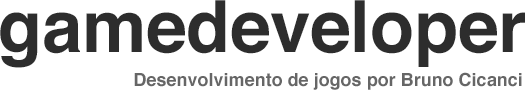
<style>
.page{position:relative;width:525px;height:100px;background:#ffffff}
.page>*{position:absolute;margin:0}
.t1{font:72px "Helvetica-Bold";color:#2d2d2d}
.t2{font:18px "Helvetica-Bold";color:#666666}
</style>
<div class="page">
<p class="t1" style="left:0px;top:0px;width:525px;height:68px">gamedeveloper</p>
<p class="t2" style="left:134px;top:72px;width:388px;height:18px">Desenvolvimento de jogos por Bruno Cicanci</p>
</div>
